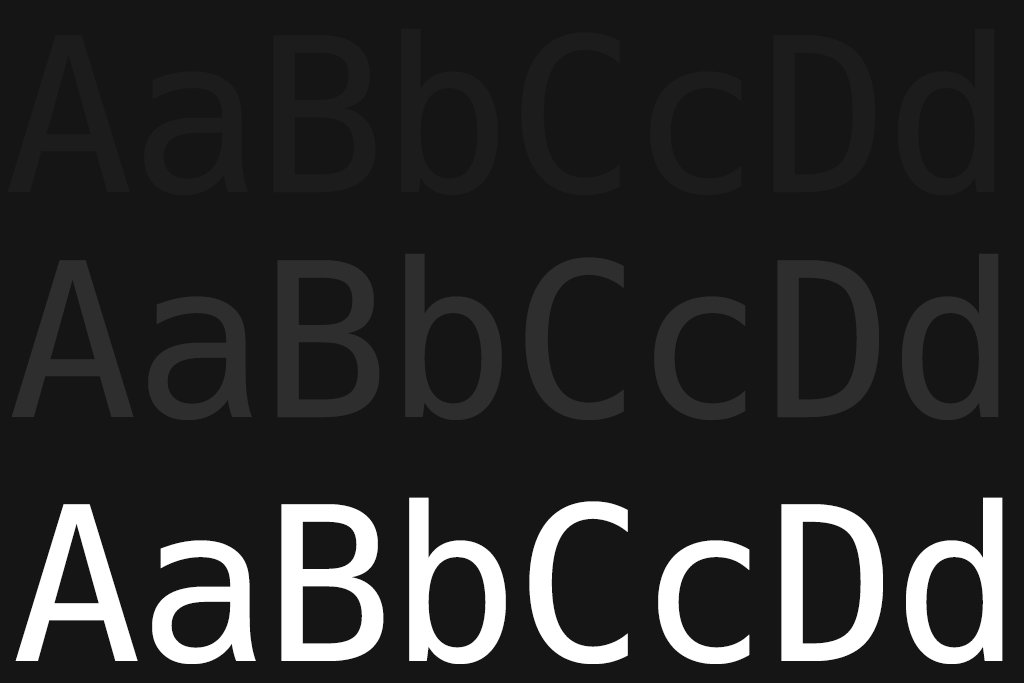
<style>
.page{position:relative;width:1024px;height:683px;background:#151515}
.page>*{position:absolute;margin:0}
.t1{font:215px "Hack-Regular";letter-spacing:-0.015em;color:#1c1c1c}
.t2{font:215px "Hack-Regular";letter-spacing:-0.015em;color:#2e2e2e}
.t3{font:215px "Hack-Regular";letter-spacing:-0.015em;color:#ffffff}
</style>
<div class="page">
<p class="t1" style="left:7px;top:28px;width:988px;height:167px">AaBbCcDd</p>
<p class="t2" style="left:11px;top:253px;width:988px;height:167px">AaBbCcDd</p>
<p class="t3" style="left:15px;top:497px;width:988px;height:167px">AaBbCcDd</p>
</div>
